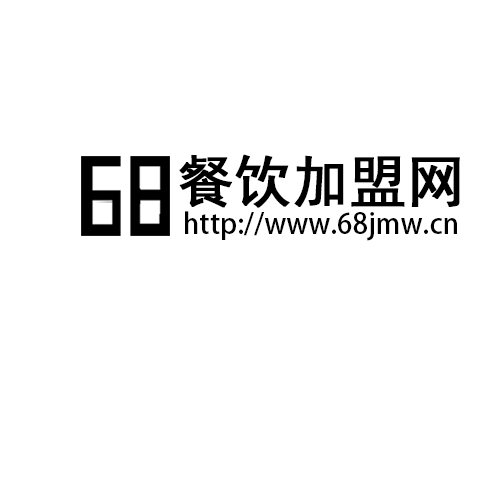
<style>
.page{position:relative;width:500px;height:500px;background:#ffffff}
.page>*{position:absolute;margin:0}
.t1{font:57.1px "SimHei";color:#000000;font-weight:bold}
.t2{font:28.4px "AdobeHeitiStd-Regular";color:#000000}
</style>
<div class="page">
<p class="t1" style="left:179px;top:154px;width:281px;height:54px">餐饮加盟网</p>
<p class="t2" style="left:185px;top:211px;width:272px;height:30px">http://www.68jmw.cn</p>
</div>
